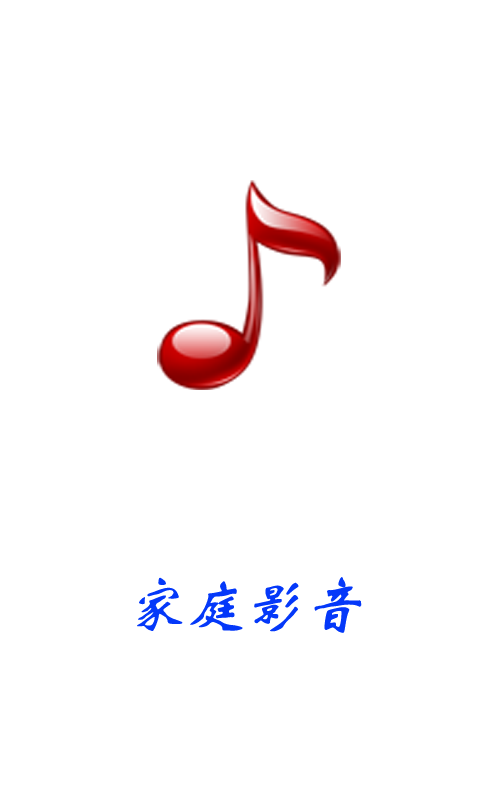
<style>
.page{position:relative;width:480px;height:800px;background:#ffffff}
.page>*{position:absolute;margin:0}
.t1{font:60px "STXinwei";color:#0438f9;font-style:italic}
</style>
<div class="page">
<p class="t1" style="left:137px;top:577px;width:225px;height:56px">家庭影音</p>
</div>
